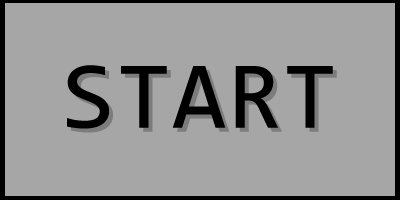
<style>
.page{position:relative;width:400px;height:200px;background:#a6a6a6}
.page>*{position:absolute;margin:0}
.t1{font:96px "Consolas";color:#000000;font-weight:bold}
.t2{font:96px "Consolas";font-weight:bold}
</style>
<div class="page">
<p class="t1" style="left:67px;top:65px;width:266px;height:64px">START</p>
<p class="t2" style="left:71px;top:69px;width:266px;height:64px">START</p>
</div>
